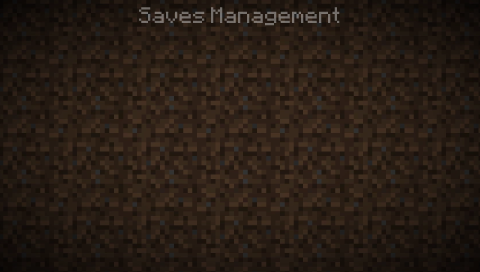
<style>
.page{position:relative;width:480px;height:272px}
.page>*{position:absolute;margin:0}
.t1{font:18px "Minecraft";color:#76706c}
</style>
<div class="page">
<p class="t1" style="left:139px;top:7px;width:201px;height:19px">Saves Management</p>
</div>
